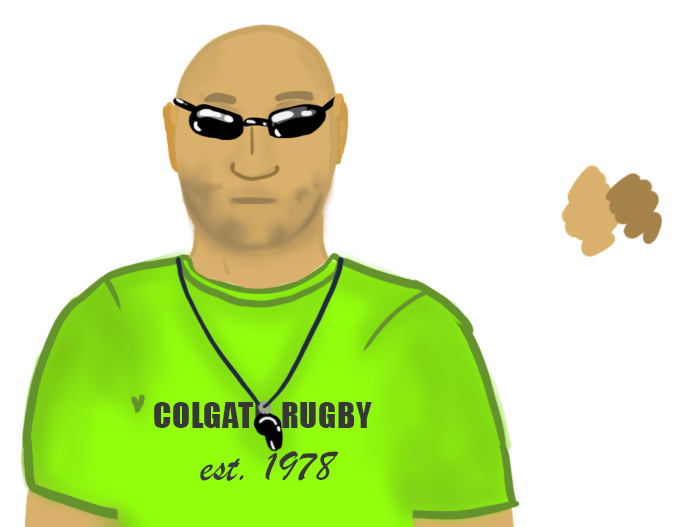
<style>
.page{position:relative;width:700px;height:527px;background:#ffffff}
.page>*{position:absolute;margin:0}
.t1{font:32.6px "Impact";letter-spacing:0.025em;color:#383838}
.t2{font:43.4px "BrushScriptMT";color:#383838}
</style>
<div class="page">
<p class="t1" style="left:154px;top:402px;width:218px;height:79px">COLGATE  RUGBY<br> <span class="t2">est. 1978</span></p>
</div>
